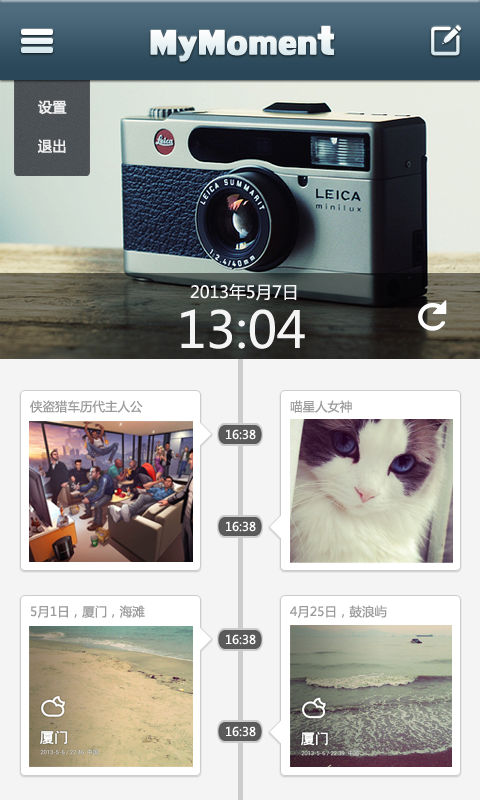
<style>
.page{position:relative;width:480px;height:800px}
.page>*{position:absolute;margin:0}
.t1{font:50px "LilyUPCBold";color:#fdfdfd;font-weight:bold}
.t2{font:58.3px "LilyUPCBold";color:#fdfdfd;font-weight:bold}
.t3{font:14px "MicrosoftYaHei";color:#eeeeee;font-weight:bold}
.t4{font:16.7px "MicrosoftYaHei";color:#f4f4f4}
.t5{font:50px "MicrosoftYaHei";color:#f4f4f4}
.t6{font:12.5px "MicrosoftYaHei";color:#9c9c9c}
.t7{font:12px "MicrosoftYaHei";color:#ffffff}
</style>
<div class="page">
<p class="t1" style="left:150px;top:26px;width:184px;height:36px">MyMomen<span class="t2">t</span></p>
<p class="t3" style="left:38px;top:100px;width:29px;height:15px">设置</p>
<p class="t3" style="left:37px;top:139px;width:29px;height:14px">退出</p>
<p class="t4" style="left:190px;top:284px;width:107px;height:17px">2013年5月7日</p>
<p class="t5" style="left:181px;top:309px;width:124px;height:40px">13:04</p>
<p class="t6" style="left:30px;top:400px;width:113px;height:13px">侠盗猎车历代主人公</p>
<p class="t6" style="left:290px;top:400px;width:62px;height:13px">喵星人女神</p>
<p class="t7" style="left:226px;top:429px;width:30px;height:11px">16:38</p>
<p class="t7" style="left:226px;top:521px;width:30px;height:11px">16:38</p>
<p class="t6" style="left:31px;top:605px;width:114px;height:13px">5月1日，厦门，海滩</p>
<p class="t6" style="left:290px;top:605px;width:97px;height:13px">4月25日，鼓浪屿</p>
<p class="t7" style="left:226px;top:634px;width:30px;height:11px">16:38</p>
<p class="t7" style="left:226px;top:726px;width:30px;height:11px">16:38</p>
</div>
